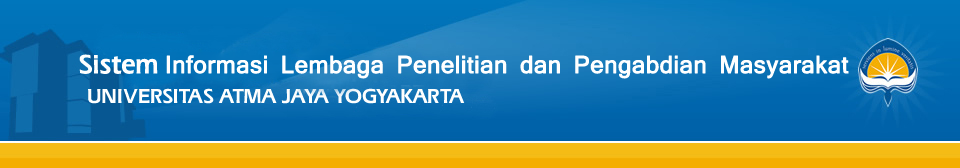
<style>
.page{position:relative;width:960px;height:168px}
.page>*{position:absolute;margin:0}
.t1{font:23px "Mangal";color:#ffffff;font-weight:bold}
</style>
<div class="page">
<p class="t1" style="left:166px;top:55px;width:683px;height:24px">Informasi Lembaga Penelitian dan Pengabdian Masyarakat</p>
</div>
